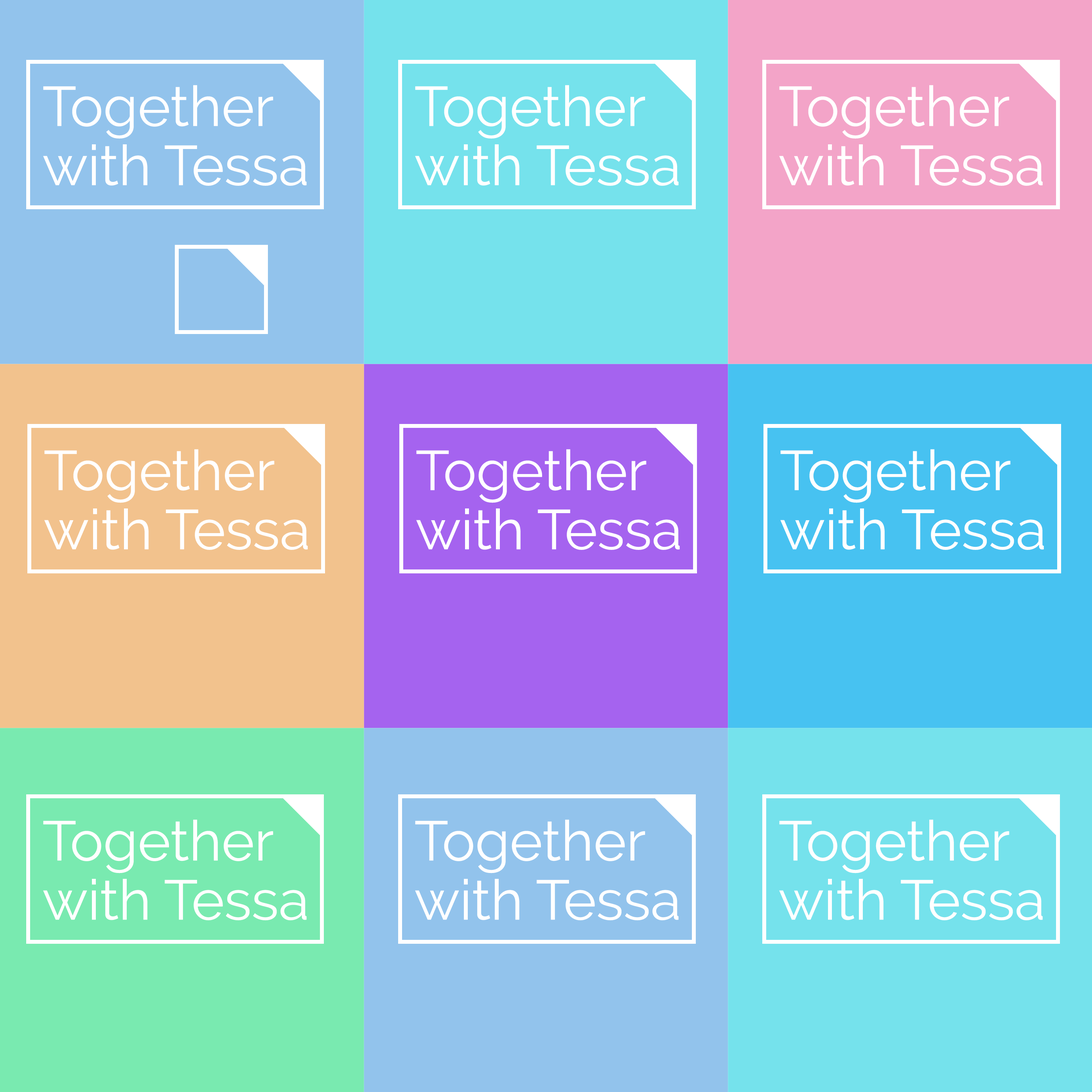
<style>
.page{position:relative;width:1092px;height:1092px}
.page>*{position:absolute;margin:0}
.t1{font:55.8px/59.1px "Raleway-Regular";color:#ffffff}
</style>
<div class="page">
<p class="t1" style="left:43px;top:85px;width:264px;height:101px">Together<br>with Tessa</p>
<p class="t1" style="left:415px;top:85px;width:264px;height:101px">Together<br>with Tessa</p>
<p class="t1" style="left:779px;top:85px;width:264px;height:101px">Together<br>with Tessa</p>
<p class="t1" style="left:44px;top:449px;width:264px;height:101px">Together<br>with Tessa</p>
<p class="t1" style="left:416px;top:449px;width:264px;height:101px">Together<br>with Tessa</p>
<p class="t1" style="left:780px;top:449px;width:264px;height:101px">Together<br>with Tessa</p>
<p class="t1" style="left:43px;top:819px;width:264px;height:101px">Together<br>with Tessa</p>
<p class="t1" style="left:415px;top:819px;width:264px;height:101px">Together<br>with Tessa</p>
<p class="t1" style="left:779px;top:819px;width:264px;height:101px">Together<br>with Tessa</p>
</div>
